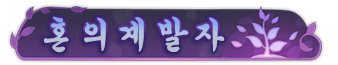
<style>
.page{position:relative;width:338px;height:65px;background:#ffffff}
.page>*{position:absolute;margin:0}
.t1{font:37px "MGungHeulim";color:#b1bfe1;font-weight:bold}
</style>
<div class="page">
<p class="t1" style="left:44px;top:16px;width:181px;height:37px">혼의계발자</p>
</div>
